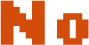
<style>
.page{position:relative;width:89px;height:45px;background:#d34c0a}
.page>*{position:absolute;margin:0}
.t1{font:50px "PressStartReg";color:#d34c0a}
</style>
<div class="page">
<p class="t1" style="left:0px;top:0px;width:89px;height:45px">No</p>
</div>
